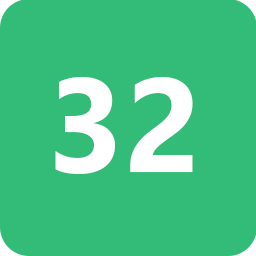
<style>
.page{position:relative;width:256px;height:256px;background:#32bc78}
.page>*{position:absolute;margin:0}
.t1{font:133.3px "LeelawadeeUI-Bold";color:#ffffff}
</style>
<div class="page">
<p class="t1" style="left:55px;top:77px;width:138px;height:97px">32</p>
</div>
